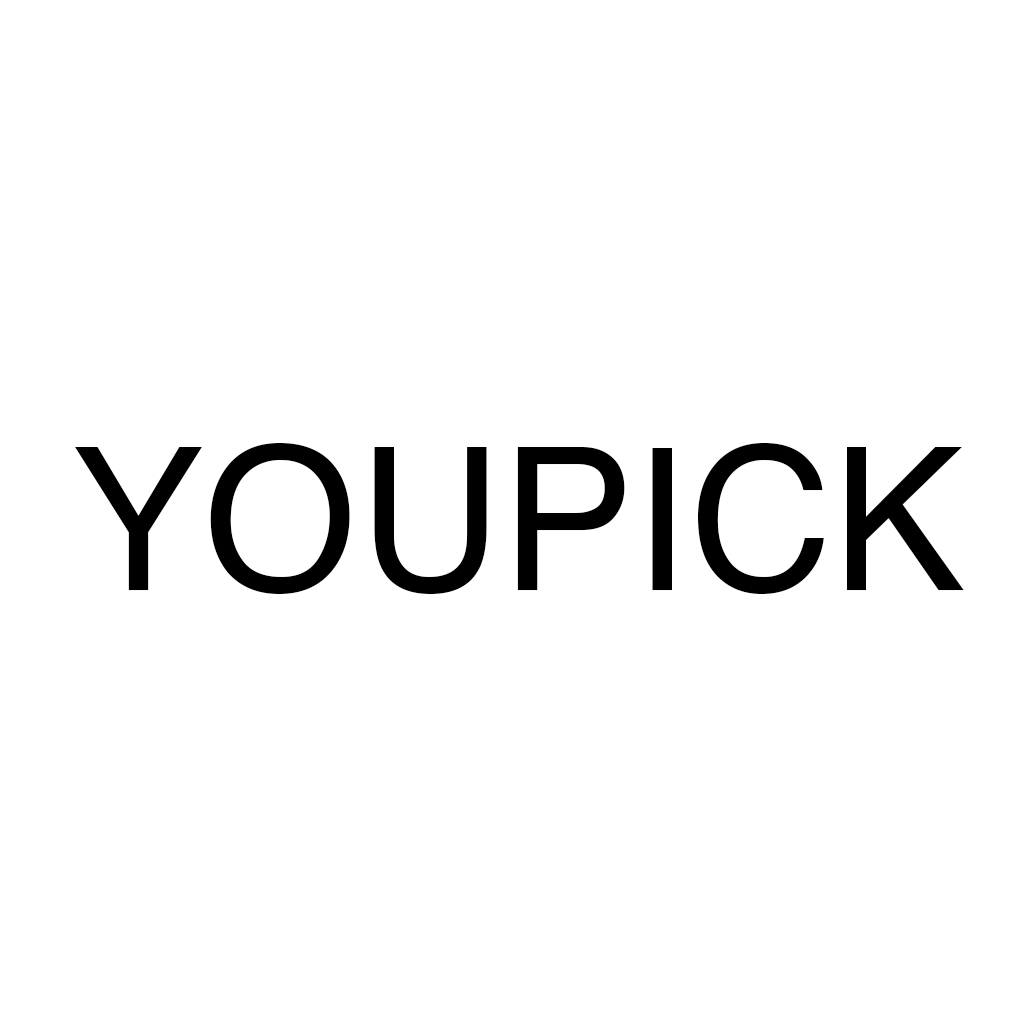
<style>
.page{position:relative;width:1024px;height:1024px;background:#ffffff}
.page>*{position:absolute;margin:0}
.t1{font:198.4px "Helvetica";color:#000000}
</style>
<div class="page">
<p class="t1" style="left:75px;top:443px;width:889px;height:151px">YOUPICK</p>
</div>
